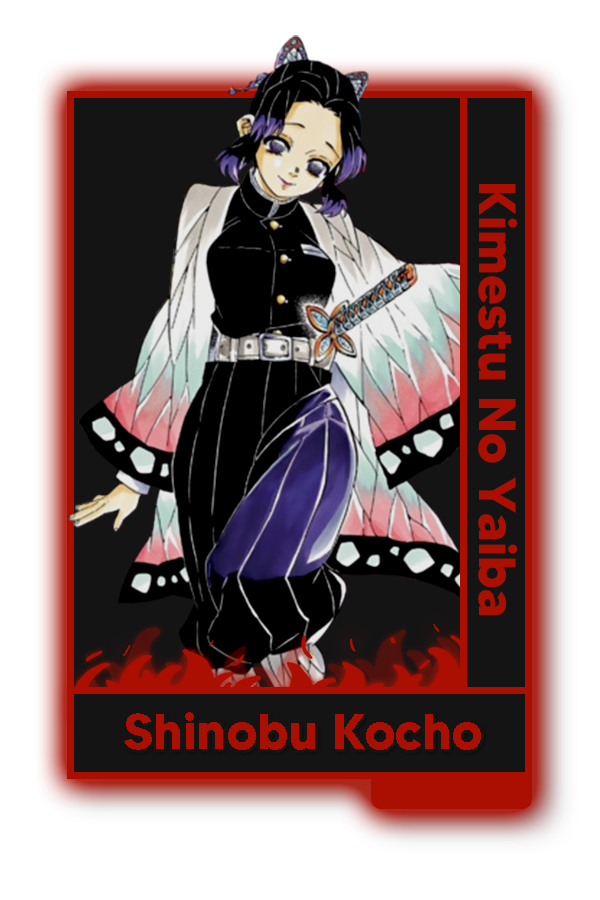
<style>
.page{position:relative;width:600px;height:900px;background:#141414}
.page>*{position:absolute;margin:0}
.t1{font:52px "MADETOMMY-Bold";color:#ab0f01}
.t2{font:50.5px "MADETOMMY-Bold";color:#ab0f01}
</style>
<div class="page">
<p class="t1" style="left:478px;top:184px;width:40px;height:431px;rotate:90deg">Kimestu No Yaiba</p>
<p class="t2" style="left:124px;top:712px;width:357px;height:38px">Shinobu Kocho</p>
</div>
